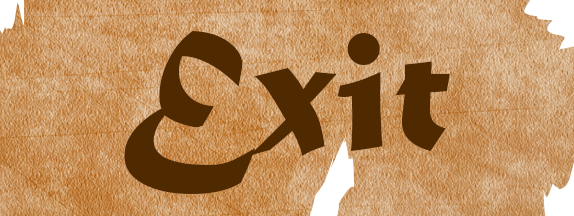
<style>
.page{position:relative;width:574px;height:216px}
.page>*{position:absolute;margin:0}
.t1{font:179.1px "MaturaMTScriptCapitals";color:#4f2900}
</style>
<div class="page">
<p class="t1" style="left:124px;top:31px;width:326px;height:163px">Exit</p>
</div>
